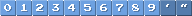
<style>
.page{position:relative;width:192px;height:16px;background:#6da1e1}
.page>*{position:absolute;margin:0}
.t1{font:8px "PressStart2P";color:#ffffff}
</style>
<div class="page">
<p class="t1" style="left:4px;top:4px;width:7px;height:7px">0</p>
<p class="t1" style="left:21px;top:4px;width:6px;height:7px">1</p>
<p class="t1" style="left:36px;top:4px;width:7px;height:7px">2</p>
<p class="t1" style="left:52px;top:4px;width:7px;height:7px">3</p>
<p class="t1" style="left:68px;top:4px;width:7px;height:7px">4</p>
<p class="t1" style="left:84px;top:4px;width:7px;height:7px">5</p>
<p class="t1" style="left:100px;top:4px;width:7px;height:7px">6</p>
<p class="t1" style="left:116px;top:4px;width:7px;height:7px">7</p>
<p class="t1" style="left:132px;top:4px;width:7px;height:7px">8</p>
<p class="t1" style="left:148px;top:4px;width:7px;height:7px">9</p>
<p class="t1" style="left:166px;top:4px;width:3px;height:3px">‘</p>
<p class="t1" style="left:181px;top:4px;width:6px;height:3px">“</p>
</div>
